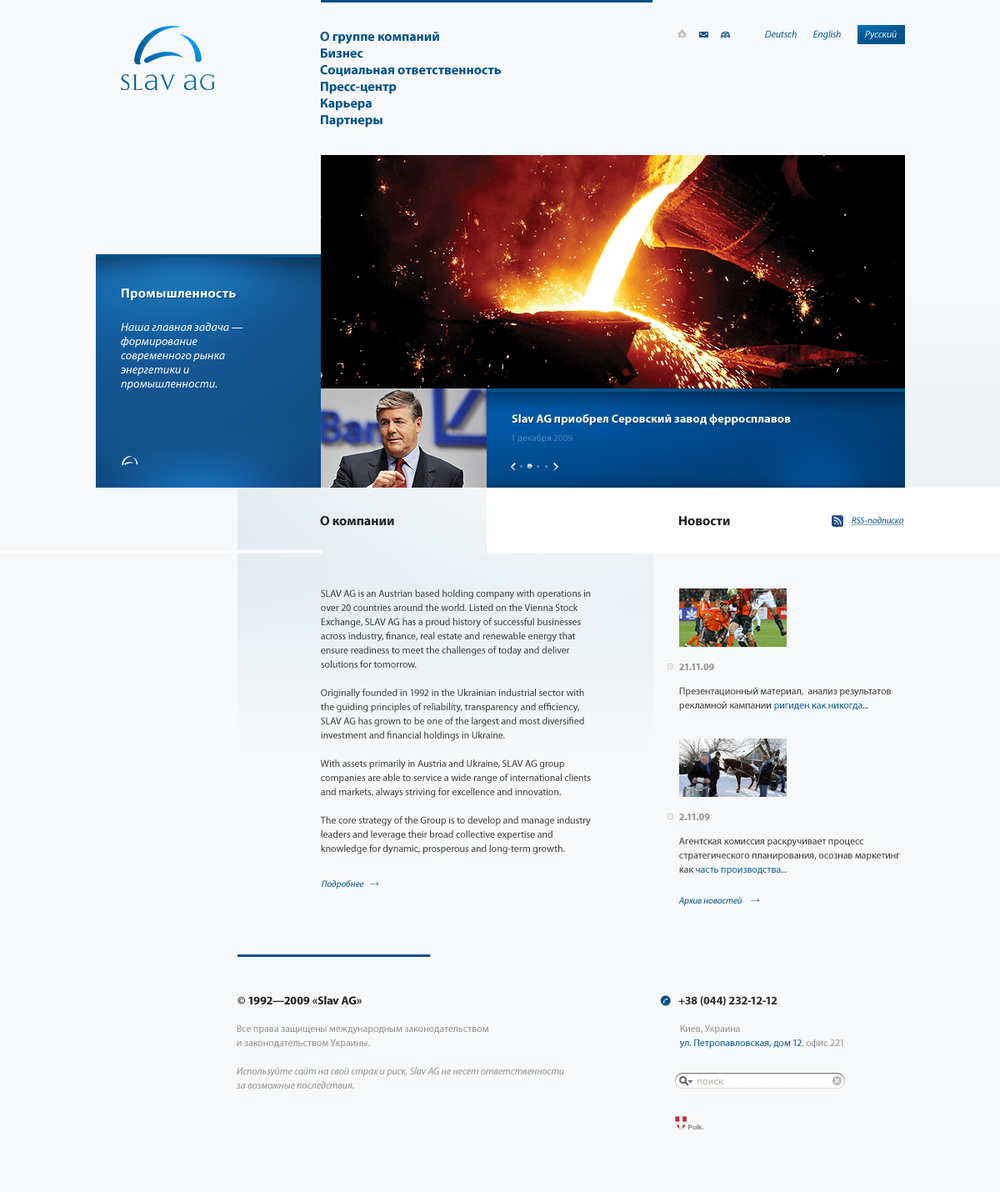
<style>
.page{position:relative;width:1000px;height:1192px;background:#f6f8f9}
.page>*{position:absolute;margin:0}
.t1{font:13.3px "MyriadPro-Bold";color:#005288}
.t2{font:10px "MyriadPro-It";color:#005288}
.t3{font:10px "MyriadPro-It";color:#eaeef1}
.t4{font:13.3px "MyriadPro-Bold";color:#ffffff}
.t5{font:11.7px "MyriadPro-It";color:#ffffff}
.t6{font:11.7px "MyriadPro-Bold";color:#ffffff}
.t7{font:9.2px "MyriadPro-Regular";color:#4d86bb}
.t8{font:13.3px "MyriadPro-Bold";color:#212121}
.t9{font:9.2px "MyriadPro-It";color:#005288;text-decoration:underline}
.t10{font:10px/14.2px "MyriadPro-Regular";color:#343534}
.t11{font:10px "MyriadPro-Bold";color:#8e8e8e}
.t12{font:10px/14.2px "MyriadPro-Regular";color:#005992}
.t13{font:9.2px "MyriadPro-It";color:#005288}
.t14{font:9.2px "ArialMT"}
.t15{font:11.7px "MyriadPro-Bold";color:#212121}
.t16{font:11.7px "MyriadPro-Bold";color:#303030}
.t17{font:10px/14.2px "MyriadPro-It";color:#8e8e8e}
.t18{font:10px/14.2px "MyriadPro-Regular";color:#8e8e8e}
.t19{font:10px/14.2px "MyriadPro-Regular";color:#005288}
.t20{font:6.7px "HelveticaNeue-Bold";color:#8a8a8a}
</style>
<div class="page">
<p class="t1" style="left:320px;top:32px;width:119px;height:12px">О группе компаний</p>
<p class="t2" style="left:765px;top:30px;width:32px;height:8px">Deutsch</p>
<p class="t2" style="left:814px;top:30px;width:27px;height:10px">English</p>
<p class="t3" style="left:865px;top:30px;width:32px;height:10px">Русский</p>
<p class="t1" style="left:321px;top:48px;width:42px;height:10px">Бизнес</p>
<p class="t1" style="left:320px;top:65px;width:182px;height:12px">Социальная ответственность</p>
<p class="t1" style="left:321px;top:82px;width:76px;height:12px">Пресс-центр</p>
<p class="t1" style="left:321px;top:98px;width:51px;height:13px">Карьера</p>
<p class="t1" style="left:321px;top:115px;width:62px;height:13px">Партнеры</p>
<p class="t4" style="left:122px;top:288px;width:114px;height:13px">Промышленность</p>
<p class="t5" style="left:120px;top:323px;width:123px;height:67px">Наша главная задача — <br>формирование<br>современного рынка<br>энергетики и<br>промышленности.</p>
<p class="t6" style="left:512px;top:414px;width:279px;height:11px">Slav AG приобрел Серовский завод ферросплавов</p>
<p class="t7" style="left:512px;top:434px;width:61px;height:9px">1 декабря 2009</p>
<p class="t8" style="left:320px;top:516px;width:74px;height:10px">О компании</p>
<p class="t8" style="left:679px;top:516px;width:51px;height:10px">Новости</p>
<p class="t9" style="left:851px;top:517px;width:53px;height:8px">RSS-подписка</p>
<p class="t10" style="left:320px;top:589px;width:271px;height:265px">SLAV AG is an Austrian based holding company with operations in over 20 countries around the world. Listed on the Vienna Stock Exchange, SLAV AG has a proud history of successful businesses across industry, finance, real estate and renewable energy that ensure readiness to meet the challenges of today and deliver solutions for tomorrow.<br><br>Originally founded in 1992 in the Ukrainian industrial sector with the guiding principles of reliability, transparency and efficiency, SLAV AG has grown to be one of the largest and most diversified investment and financial holdings in Ukraine.<br><br>With assets primarily in Austria and Ukraine, SLAV AG group companies are able to service a wide range of international clients and markets, always striving for excellence and innovation.<br><br>The core strategy of the Group is to develop and manage industry leaders and leverage their broad collective expertise and knowledge for dynamic, prosperous and long-term growth.</p>
<p class="t11" style="left:679px;top:664px;width:35px;height:6px">21.11.09</p>
<p class="t10" style="left:679px;top:687px;width:212px;height:24px">Презентационный материал,  анализ результатов<br>рекламной кампании <span class="t12">ригиден как никогда</span>...</p>
<p class="t11" style="left:679px;top:814px;width:31px;height:6px">2.11.09</p>
<p class="t10" style="left:679px;top:837px;width:221px;height:38px">Агентская комиссия раскручивает процесс<br>стратегического планирования, осознав маркетинг<br>как <span class="t12">часть производства</span>...</p>
<p class="t13" style="left:322px;top:880px;width:42px;height:9px">Подробнее</p>
<p class="t14" style="left:370px;top:882px;width:9px;height:4px">→</p>
<p class="t13" style="left:679px;top:897px;width:64px;height:9px">Архив новостей</p>
<p class="t14" style="left:751px;top:899px;width:9px;height:4px">→</p>
<p class="t15" style="left:238px;top:996px;width:124px;height:8px">© 1992—2009 «Slav AG»</p>
<p class="t16" style="left:679px;top:996px;width:99px;height:10px">+38 (044) 232-12-12</p>
<p class="t17" style="left:236px;top:1024px;width:328px;height:65px"><span class="t18">Все права защищены международным законодательством<br>и законодательством Украины.<br><br></span>Используйте сайт на свой страх и риск, Slav AG не несет ответственности<br>за возможные последствия.</p>
<p class="t19" style="left:679px;top:1024px;width:165px;height:25px"><span class="t18">Киев, Украина<br></span>ул. Петропавловская, дом 12<span class="t18">, офис 221</span></p>
<p class="t20" style="left:689px;top:1125px;width:15px;height:5px">Polk.</p>
</div>
